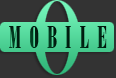
<style>
.page{position:relative;width:116px;height:78px;background:#333333}
.page>*{position:absolute;margin:0}
.t1{font:30px "Onyx";letter-spacing:0.28em;color:#002212;text-transform:uppercase}
</style>
<div class="page">
<p class="t1" style="left:9px;top:26px;width:98px;height:22px">MObile</p>
</div>
